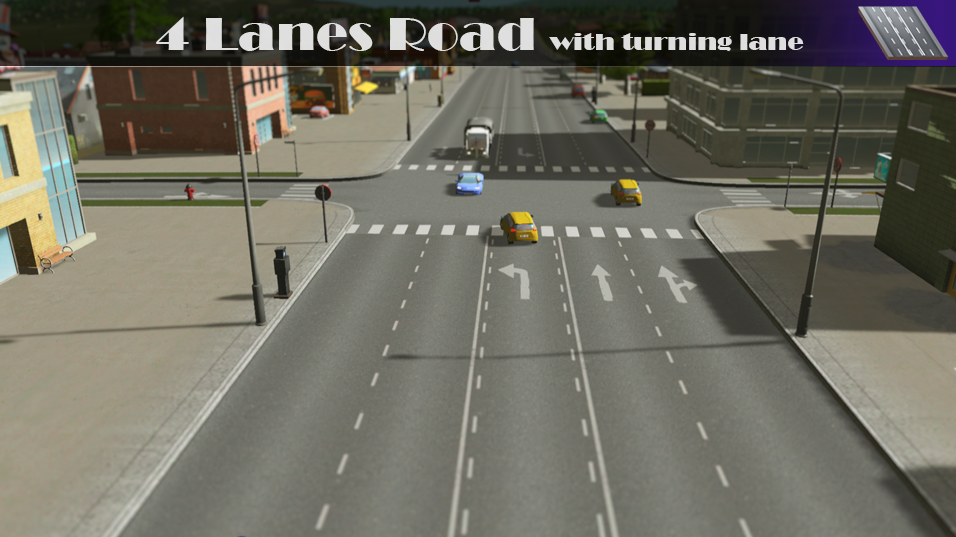
<style>
.page{position:relative;width:956px;height:537px}
.page>*{position:absolute;margin:0}
.t1{font:24px "Broadway";color:#dfdfde;scale:1.11 1}
.t2{font:48px "Broadway";color:#dfdfde;scale:1.11 1}
</style>
<div class="page">
<p class="t1" style="left:156px;top:16px;width:648px;height:35px"><span class="t2">4 Lanes Road</span>  with turning lane</p>
</div>
